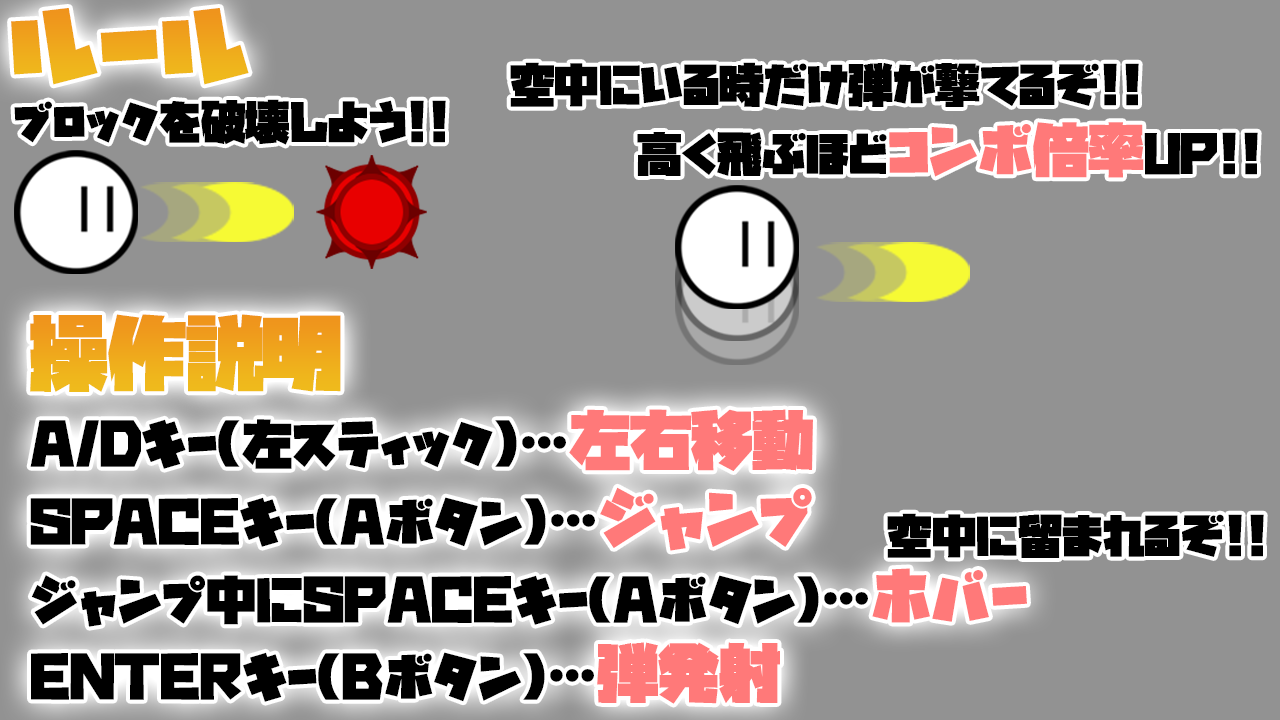
<style>
.page{position:relative;width:1280px;height:720px;background:#929292}
.page>*{position:absolute;margin:0}
.t1{font:100px "GN-KMBFont-UB-NewstyleKanaA";color:#efa91c}
.t2{font:44.4px "GN-KMBFont-UB-NewstyleKanaA";color:#000000}
.t3{font:55.6px "GN-KMBFont-UB-NewstyleKanaA";color:#ff7979}
.t4{font:77.8px "GN-KMBFont-UB-NewstyleKanaA";color:#efa71c}
.t5{font:50px/77.8px "GN-KMBFont-UB-NewstyleKanaA";color:#000000}
.t6{font:61.1px/77.8px "GN-KMBFont-UB-NewstyleKanaA";color:#ff7979}
</style>
<div class="page">
<p class="t1" style="left:11px;top:8px;width:238px;height:77px">ルール</p>
<p class="t2" style="left:510px;top:62px;width:629px;height:45px">空中にいる時だけ弾が撃てるぞ!!</p>
<p class="t2" style="left:14px;top:99px;width:432px;height:46px">ブロックを破壊しよう!!</p>
<p class="t2" style="left:637px;top:122px;width:621px;height:56px">高く飛ぶほど<span class="t3">コンボ倍率</span>UP!!</p>
<p class="t4" style="left:30px;top:314px;width:311px;height:78px">操作説明</p>
<p class="t5" style="left:30px;top:409px;width:997px;height:295px">A/Dキー(左スティック)…<span class="t6">左右移動<br></span>SPACEキー(Aボタン)…<span class="t6">ジャンプ<br></span>ジャンプ中にSPACEキー(Aボタン)…<span class="t6">ホバー<br></span>ENTERキー(Bボタン)…<span class="t6">弾発射</span></p>
<p class="t2" style="left:887px;top:513px;width:377px;height:45px">空中に留まれるぞ!!</p>
</div>
